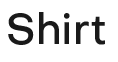
<style>
.page{position:relative;width:118px;height:62px;background:#ffffff}
.page>*{position:absolute;margin:0}
.t1{font:43px "Objectivity-Medium";color:#1a1a1a}
</style>
<div class="page">
<p class="t1" style="left:8px;top:12px;width:97px;height:33px">Shirt</p>
</div>
